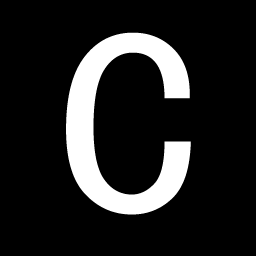
<style>
.page{position:relative;width:256px;height:256px;background:#000000}
.page>*{position:absolute;margin:0}
.t1{font:265.6px "SimHei";letter-spacing:0.14em;color:#ffffff;scale:1.09 1}
</style>
<div class="page">
<p class="t1" style="left:66px;top:32px;width:125px;height:183px">C</p>
</div>
